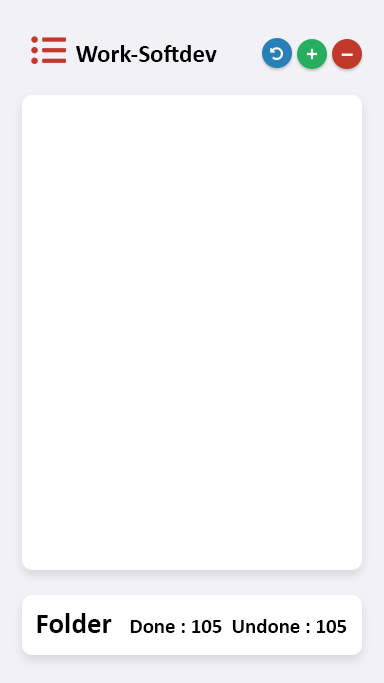
<style>
.page{position:relative;width:384px;height:683px;background:#ffffff}
.page>*{position:absolute;margin:0}
.t1{font:25px "Calibri-Bold";color:#000000}
.t2{font:29.2px "Calibri-Bold";color:#000000}
.t3{font:20.8px "Calibri-Bold";color:#000000}
</style>
<div class="page">
<p class="t1" style="left:76px;top:45px;width:141px;height:17px">Work-Softdev</p>
<p class="t2" style="left:37px;top:613px;width:75px;height:20px">Folder</p>
<p class="t3" style="left:130px;top:620px;width:92px;height:13px">Done : 105</p>
<p class="t3" style="left:232px;top:619px;width:115px;height:14px">Undone : 105</p>
</div>
